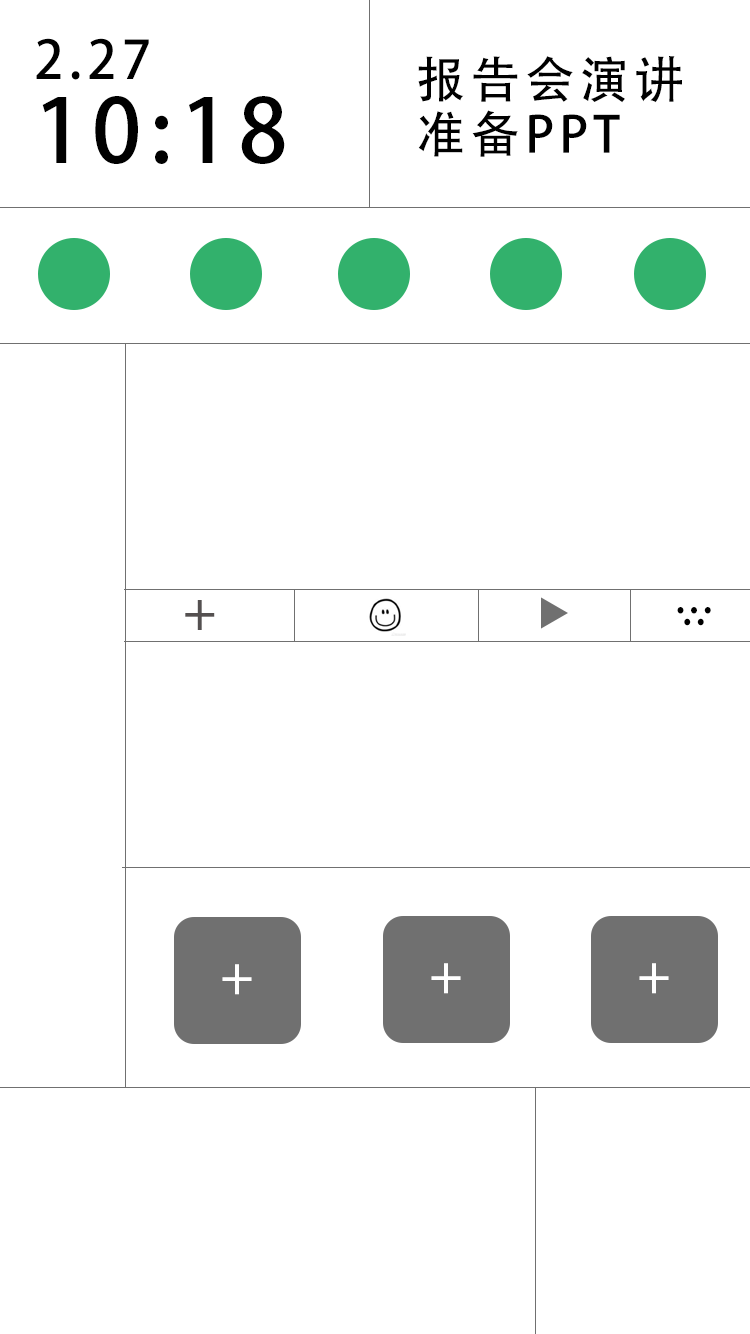
<style>
.page{position:relative;width:750px;height:1334px;background:#ffffff}
.page>*{position:absolute;margin:0}
.t1{font:87.6px "AdobeHeitiStd-Regular";letter-spacing:0.1em;color:#000000}
.t2{font:52.6px "AdobeHeitiStd-Regular";letter-spacing:0.1em;color:#000000}
.t3{font:49.6px "AdobeHeitiStd-Regular";letter-spacing:0.1em;color:#000000}
.t4{font:49.6px "AdobeHeitiStd-Regular";letter-spacing:0.1em;color:#545050}
.t5{font:40.6px "AdobeHeitiStd-Regular";letter-spacing:0.1em;color:#000000}
.t6{font:19px "AdobeHeitiStd-Regular";letter-spacing:0.1em;color:#000000}
.t7{font:49.6px "AdobeHeitiStd-Regular";letter-spacing:0.1em;color:#ffffff}
.t8{font:20.6px "AdobeHeitiStd-Regular";letter-spacing:0.1em;color:#ffffff}
</style>
<div class="page">
<p class="t1" style="left:36px;top:38px;width:249px;height:126px"><span class="t2">2.27<br></span>10:18</p>
<p class="t3" style="left:418px;top:56px;width:264px;height:101px">报告会演讲<br>准备PPT</p>
<p class="t4" style="left:185px;top:600px;width:30px;height:30px">+</p>
<p class="t5" style="left:677px;top:607px;width:34px;height:19px"><span class="t6"> </span>．..<br> ．.</p>
<p class="t7" style="left:222px;top:964px;width:30px;height:31px"><span class="t8">  <br>   </span>+</p>
<p class="t7" style="left:431px;top:963px;width:30px;height:31px"><span class="t8">  <br>   </span>+</p>
<p class="t7" style="left:639px;top:963px;width:30px;height:31px"><span class="t8">  <br>   </span>+</p>
</div>
